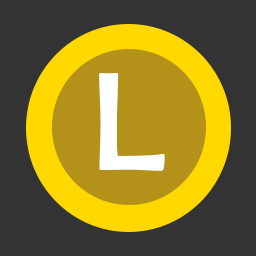
<style>
.page{position:relative;width:256px;height:256px;background:#333333}
.page>*{position:absolute;margin:0}
.t1{font:141.7px "BerlinSansFB-Reg";color:#ffffff}
</style>
<div class="page">
<p class="t1" style="left:99px;top:73px;width:66px;height:98px">L</p>
</div>
